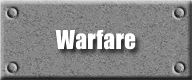
<style>
.page{position:relative;width:192px;height:80px}
.page>*{position:absolute;margin:0}
.t1{font:24px "Impact";color:#ffffff}
</style>
<div class="page">
<p class="t1" style="left:55px;top:30px;width:81px;height:20px">Warfare</p>
</div>
